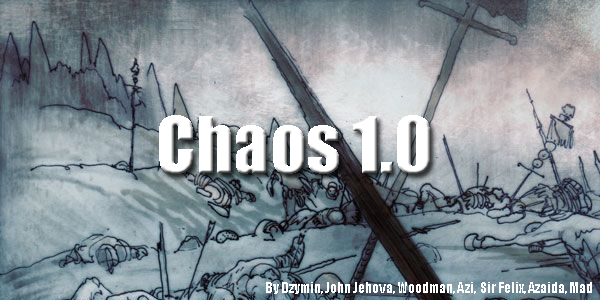
<style>
.page{position:relative;width:600px;height:300px}
.page>*{position:absolute;margin:0}
.t1{font:72px "Impact";color:#ffffff}
.t2{font:14px "Impact";color:#ffffff}
</style>
<div class="page">
<p class="t1" style="left:159px;top:115px;width:271px;height:59px">Chaos 1.0</p>
<p class="t2" style="left:266px;top:282px;width:326px;height:12px">By Dzymin, John Jehova, Woodman, Azi,  Sir Felix, Azaida, Mad</p>
</div>
